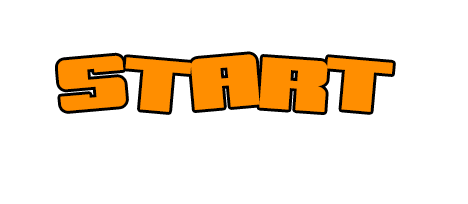
<style>
.page{position:relative;width:468px;height:204px;background:#ffffff}
.page>*{position:absolute;margin:0}
.t1{font:72px "AftershockDebrisSolid";color:#ff8e00}
</style>
<div class="page">
<p class="t1" style="left:58px;top:54px;width:335px;height:58px">START</p>
</div>
